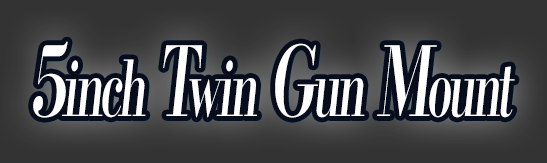
<style>
.page{position:relative;width:547px;height:163px}
.page>*{position:absolute;margin:0}
.t1{font:76.8px "KochoStd-Heavy";letter-spacing:-0.08em;color:#ffffff;font-style:italic;scale:0.6 1}
.t2{font:96px "KochoStd-Heavy";letter-spacing:-0.08em;color:#ffffff;font-style:italic;scale:0.6 1}
</style>
<div class="page">
<p class="t1" style="left:33px;top:41px;width:482px;height:77px"><span class="t2">5</span>inch<span class="t2"> T</span>win<span class="t2"> G</span>un<span class="t2"> M</span>ount</p>
</div>
